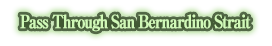
<style>
.page{position:relative;width:272px;height:46px;background:#ffffff}
.page>*{position:absolute;margin:0}
.t1{font:18px "RyuminPro-ExBold";letter-spacing:-0.08em;color:#e1f1c3;font-weight:bold;scale:0.8 1}
</style>
<div class="page">
<p class="t1" style="left:20px;top:14px;width:231px;height:18px">Pass Through San Bernardino Strait</p>
</div>
